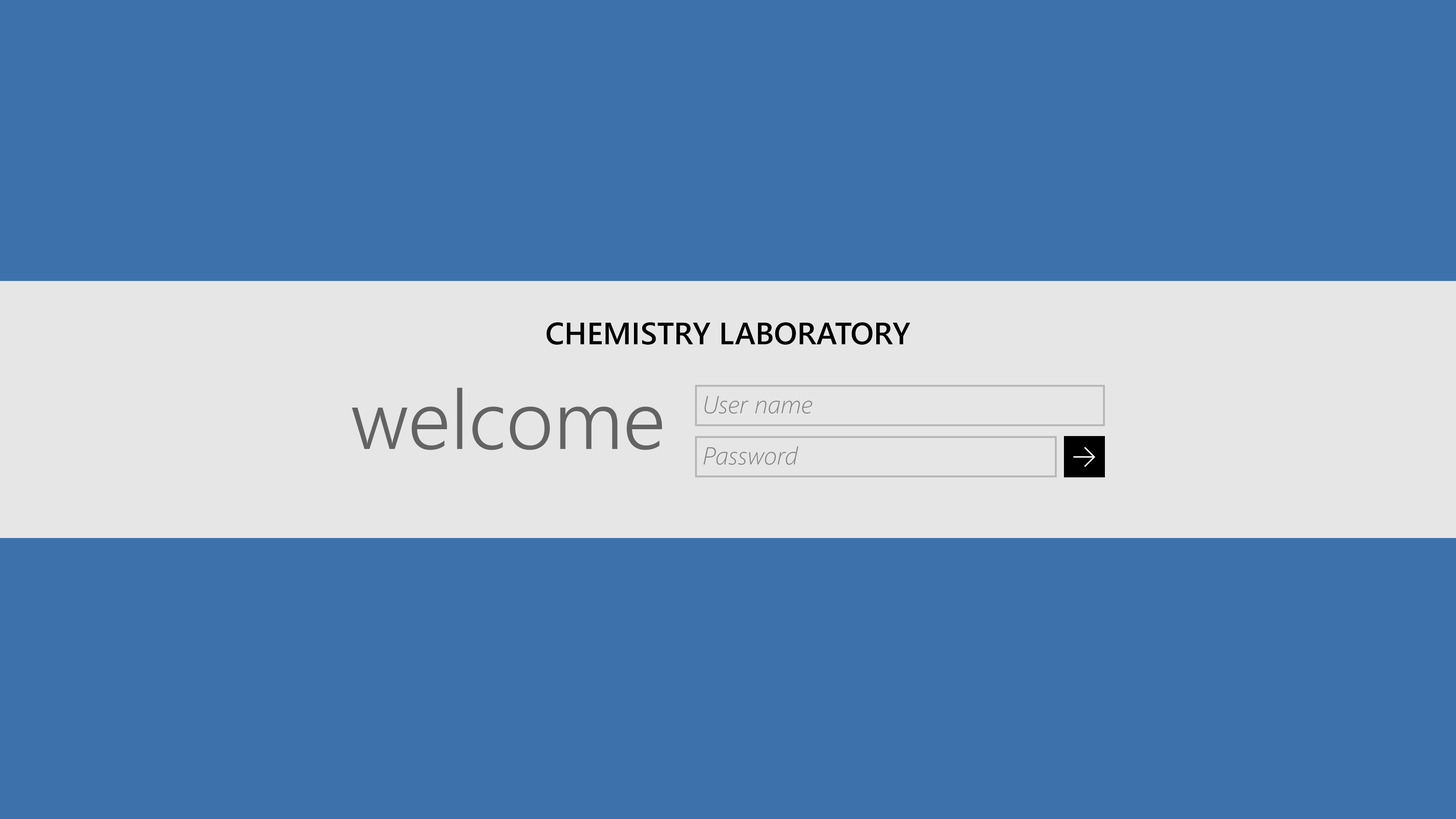
<style>
.page{position:relative;width:1456px;height:819px;background:#3d71ac}
.page>*{position:absolute;margin:0}
.t1{font:30.8px "SegoeUI-Semibold";color:#000000}
.t2{font:82.7px "SegoeUI-Semilight";color:#636363}
.t3{font:24.7px "SegoeUI-LightItalic";color:#848282}
</style>
<div class="page">
<p class="t1" style="left:546px;top:322px;width:364px;height:23px">CHEMISTRY LABORATORY</p>
<p class="t2" style="left:352px;top:388px;width:310px;height:62px">welcome</p>
<p class="t3" style="left:704px;top:396px;width:108px;height:18px">User name</p>
<p class="t3" style="left:703px;top:446px;width:96px;height:19px">Password</p>
</div>
